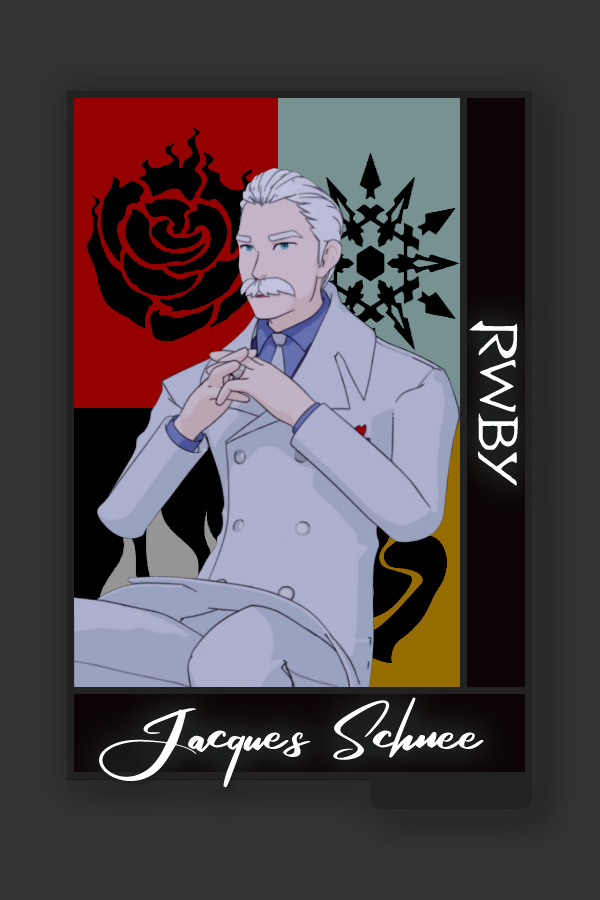
<style>
.page{position:relative;width:600px;height:900px;background:#333333}
.page>*{position:absolute;margin:0}
.t1{font:61.3px "RWBY_Style";color:#ffffff;scale:1.25 1}
.t2{font:75px "RosegaFREE";color:#ffffff}
</style>
<div class="page">
<p class="t1" style="left:469px;top:320px;width:49px;height:166px;rotate:90deg">RWBY</p>
<p class="t2" style="left:66px;top:685px;width:419px;height:123px">Jacques Schnee</p>
</div>
